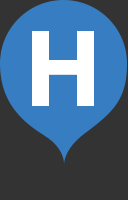
<style>
.page{position:relative;width:128px;height:200px;background:#333333}
.page>*{position:absolute;margin:0}
.t1{font:111.6px "MyriadPro-Bold";color:#ffffff}
</style>
<div class="page">
<p class="t1" style="left:32px;top:31px;width:62px;height:75px">H</p>
</div>
